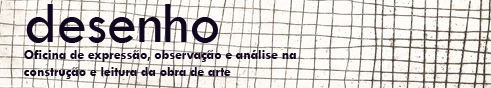
<style>
.page{position:relative;width:491px;height:88px}
.page>*{position:absolute;margin:0}
.t1{font:14px "TwCenMT-Bold";color:#10061f}
.t2{font:60px "TwCenMT-Regular";color:#10061f}
</style>
<div class="page">
<p class="t1" style="left:24px;top:4px;width:272px;height:75px"><span class="t2">desenho<br></span>Oficina de expressão, observação e análise na <br>construção e leitura da obra de arte</p>
</div>
